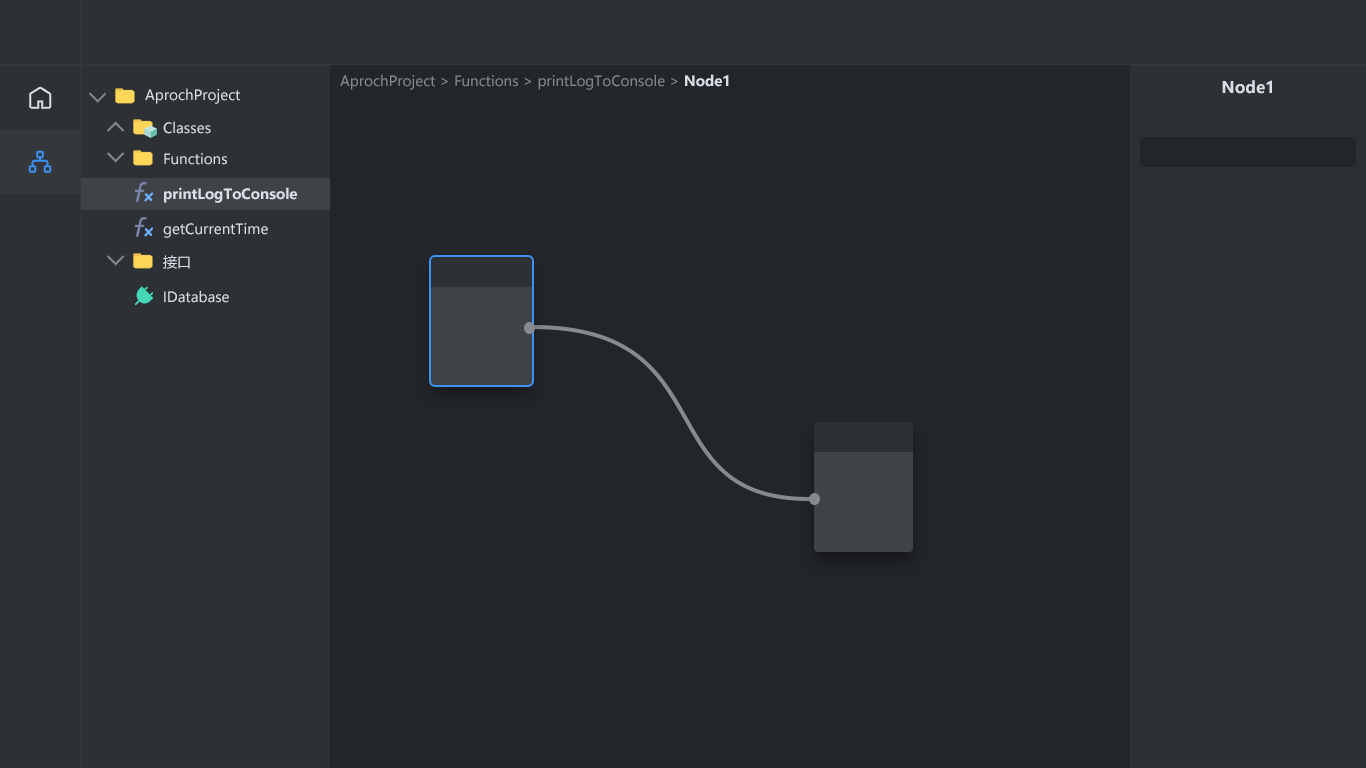
<style>
.page{position:relative;width:1366px;height:768px;background:#22252a}
.page>*{position:absolute;margin:0}
.t1{font:14px "MicrosoftYaHei";color:#86898e}
.t2{font:14px "MicrosoftYaHei-Bold";color:#dadfe7}
.t3{font:14px "MicrosoftYaHei";color:#dadfe7}
.t4{font:16px "MicrosoftYaHei-Bold";color:#dadfe7}
</style>
<div class="page">
<p class="t1" style="left:340px;top:74px;width:389px;height:16px">AprochProject &gt; Functions &gt; printLogToConsole &gt; <span class="t2">Node1</span></p>
<p class="t3" style="left:145px;top:88px;width:95px;height:16px">AprochProject</p>
<p class="t4" style="left:1222px;top:80px;width:50px;height:14px">Node1</p>
<p class="t3" style="left:163px;top:121px;width:48px;height:13px">Classes</p>
<p class="t3" style="left:164px;top:153px;width:63px;height:12px">Functions</p>
<p class="t2" style="left:164px;top:187px;width:133px;height:16px">printLogToConsole</p>
<p class="t3" style="left:163px;top:223px;width:105px;height:15px">getCurrentTime</p>
<p class="t3" style="left:163px;top:255px;width:27px;height:14px">接口</p>
<p class="t3" style="left:164px;top:290px;width:65px;height:13px">IDatabase</p>
</div>
